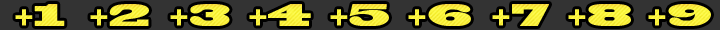
<style>
.page{position:relative;width:720px;height:30px;background:#333333}
.page>*{position:absolute;margin:0}
.t1{font:30px "BlackoakStd";color:#f9f13e}
.t2{font:30px "BlackoakStd";color:#f9f13f}
.t3{font:30px "BlackoakStd";color:#f9f13d}
.t4{font:30px "BlackoakStd";color:#f9f03d}
</style>
<div class="page">
<p class="t1" style="left:15px;top:4px;width:50px;height:22px">+1</p>
<p class="t1" style="left:90px;top:4px;width:59px;height:22px">+2</p>
<p class="t2" style="left:170px;top:4px;width:60px;height:22px">+3</p>
<p class="t1" style="left:249px;top:4px;width:62px;height:22px">+4</p>
<p class="t2" style="left:330px;top:4px;width:59px;height:22px">+5</p>
<p class="t3" style="left:408px;top:4px;width:63px;height:22px">+6</p>
<p class="t4" style="left:492px;top:4px;width:57px;height:22px">+7</p>
<p class="t1" style="left:568px;top:4px;width:63px;height:22px">+8</p>
<p class="t1" style="left:648px;top:4px;width:63px;height:22px">+9</p>
</div>
